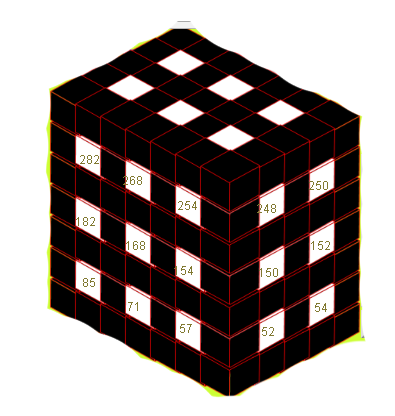
<style>
.page{position:relative;width:395px;height:416px;background:#ffffff}
.page>*{position:absolute;margin:0}
.t1{font:12px "ArialMT";color:#817931}
</style>
<div class="page">
<p class="t1" style="left:80px;top:155px;width:19px;height:9px">282</p>
<p class="t1" style="left:123px;top:176px;width:19px;height:9px">268</p>
<p class="t1" style="left:309px;top:181px;width:19px;height:9px">250</p>
<p class="t1" style="left:178px;top:201px;width:19px;height:9px">254</p>
<p class="t1" style="left:257px;top:204px;width:19px;height:9px">248</p>
<p class="t1" style="left:76px;top:217px;width:19px;height:9px">182</p>
<p class="t1" style="left:126px;top:241px;width:19px;height:9px">168</p>
<p class="t1" style="left:311px;top:241px;width:19px;height:9px">152</p>
<p class="t1" style="left:174px;top:266px;width:19px;height:9px">154</p>
<p class="t1" style="left:259px;top:268px;width:19px;height:9px">150</p>
<p class="t1" style="left:83px;top:278px;width:12px;height:9px">85</p>
<p class="t1" style="left:128px;top:302px;width:10px;height:9px">71</p>
<p class="t1" style="left:315px;top:303px;width:12px;height:9px">54</p>
<p class="t1" style="left:180px;top:324px;width:12px;height:9px">57</p>
<p class="t1" style="left:262px;top:327px;width:12px;height:9px">52</p>
</div>
